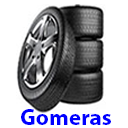
<style>
.page{position:relative;width:128px;height:128px;background:#ffffff}
.page>*{position:absolute;margin:0}
.t1{font:23px "MyriadPro-Bold";color:#0000ff}
</style>
<div class="page">
<p class="t1" style="left:21px;top:109px;width:90px;height:16px">Gomeras</p>
</div>
